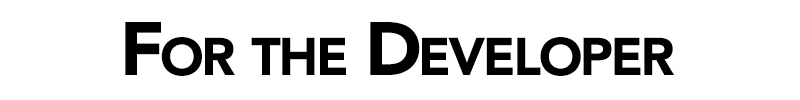
<style>
.page{position:relative;width:800px;height:100px;background:#ffffff}
.page>*{position:absolute;margin:0}
.t1{font:75px "AvenirLT-Black";letter-spacing:-0.05em;color:#000000;font-variant:small-caps}
</style>
<div class="page">
<p class="t1" style="left:125px;top:22px;width:550px;height:54px">For the Developer</p>
</div>
